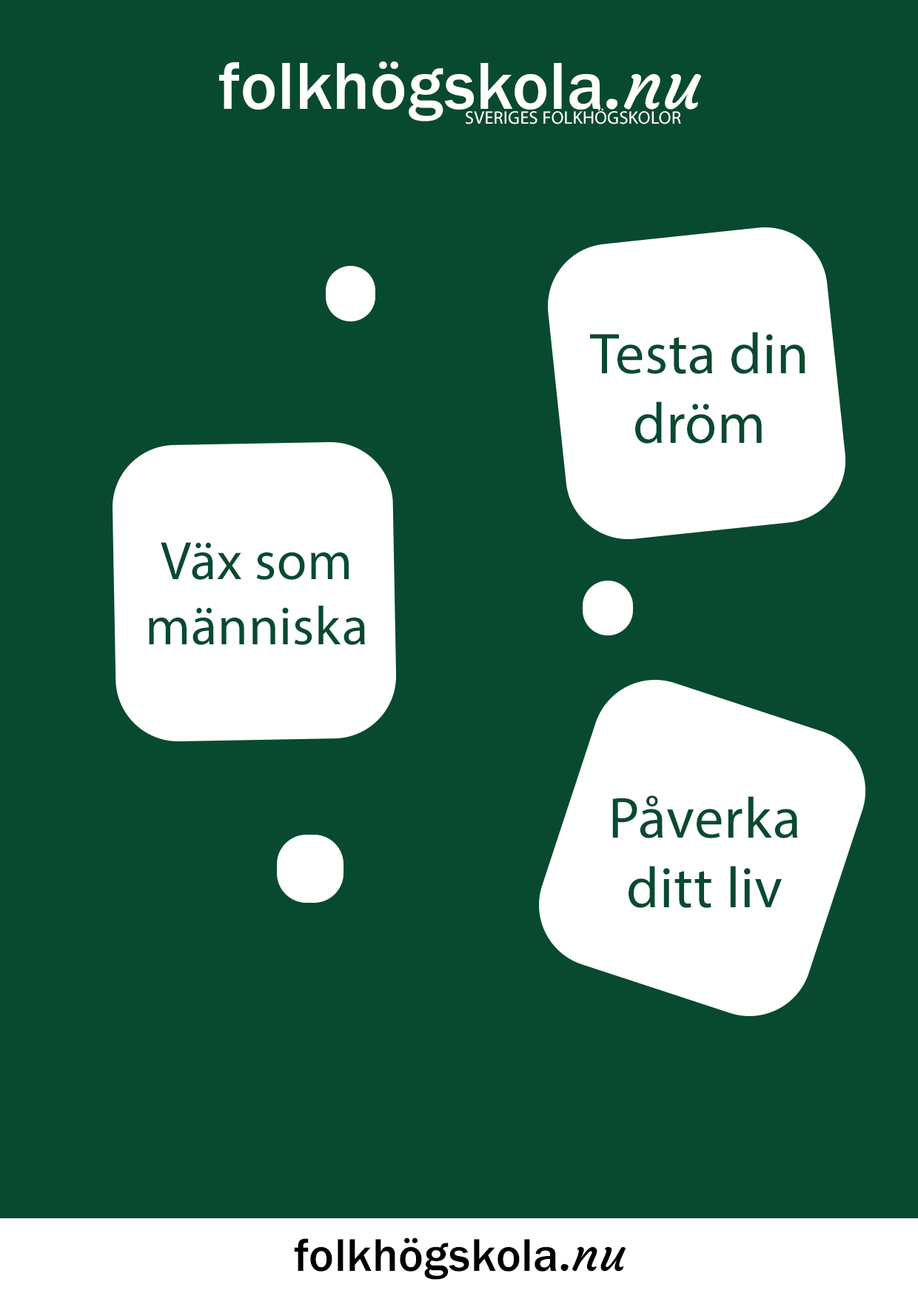
<style>
.page{position:relative;width:918px;height:1299px;background:#084a2f}
.page>*{position:absolute;margin:0}
.t1{font:68.9px "FranklinGothic-Medium";letter-spacing:0.01em;color:#ffffff}
.t2{font:68.9px "Courgette-Regular";letter-spacing:0.01em;color:#ffffff}
.t3{font:18.1px "MyriadPro-Regular";letter-spacing:0.01em;color:#ffffff}
.t4{font:58px "MyriadPro-Regular";letter-spacing:0.01em;color:#084a2f}
.t5{font:54.4px "MyriadPro-Regular";letter-spacing:0.01em;color:#084a2f}
.t6{font:47.3px "FranklinGothic-Medium";letter-spacing:0.01em;color:#000000}
.t7{font:47.3px "Courgette-Regular";letter-spacing:0.01em;color:#000000}
</style>
<div class="page">
<p class="t1" style="left:219px;top:61px;width:482px;height:60px">folkhögskola<span class="t2">.nu</span></p>
<p class="t3" style="left:466px;top:108px;width:215px;height:16px">SVERIGES FOLKHÖGSKOLOR</p>
<p class="t4" style="left:590px;top:332px;width:215px;height:112px;text-align:center">Testa din dröm</p>
<p class="t5" style="left:149px;top:542px;width:216px;height:103px;text-align:center">Väx som<br>människa</p>
<p class="t4" style="left:612px;top:795px;width:185px;height:113px;text-align:center">Påverka<br>ditt liv</p>
<p class="t6" style="left:294px;top:1237px;width:332px;height:42px">folkhögskola<span class="t7">.nu</span></p>
</div>
